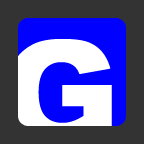
<style>
.page{position:relative;width:144px;height:144px;background:#333333}
.page>*{position:absolute;margin:0}
.t1{font:144px "Arial-Black";color:#ffffff}
</style>
<div class="page">
<p class="t1" style="left:6px;top:39px;width:106px;height:107px">G</p>
</div>
